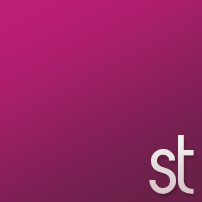
<style>
.page{position:relative;width:202px;height:202px}
.page>*{position:absolute;margin:0}
.t1{font:75px "AbeatbyKai";letter-spacing:-0.05em;color:#e4d7d9}
</style>
<div class="page">
<p class="t1" style="left:149px;top:135px;width:45px;height:59px">st</p>
</div>
